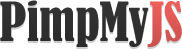
<style>
.page{position:relative;width:182px;height:49px;background:#ffffff}
.page>*{position:absolute;margin:0}
.t1{font:50px "BernardMT-Condensed";letter-spacing:-0.005em;color:#333333}
.t2{font:50px "BernardMT-Condensed";letter-spacing:-0.005em;color:#ee5f5b}
</style>
<div class="page">
<p class="t1" style="left:0px;top:0px;width:182px;height:47px">PimpMy<span class="t2">JS</span></p>
</div>
